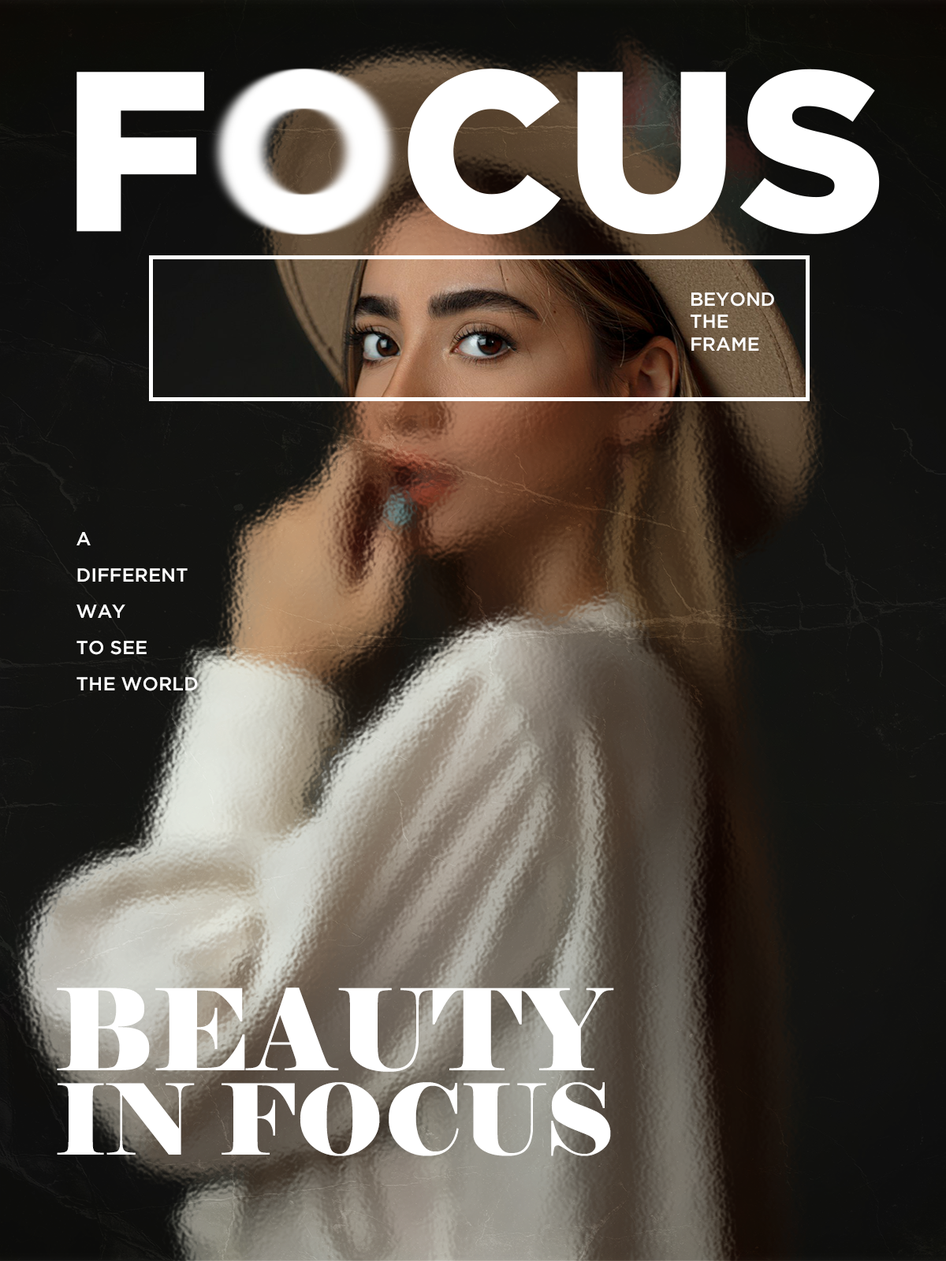
<style>
.page{position:relative;width:946px;height:1261px}
.page>*{position:absolute;margin:0}
.t1{font:18.9px "GothamMedium";color:#ffffff}
.t2{font:18.9px/36.3px "GothamMedium";color:#ffffff}
.t3{font:97.7px/84.3px "Elephant-Regular";color:#ffffff;text-transform:uppercase}
.t4{font:112.7px/84.3px "Elephant-Regular";color:#ffffff;text-transform:uppercase}
</style>
<div class="page">
<p class="t1" style="left:690px;top:292px;width:84px;height:59px">BEYOND<br>THE<br>FRAME</p>
<p class="t2" style="left:76px;top:532px;width:122px;height:159px">A<br>DIFFERENT<br>WAY<br>TO SEE<br>THE WORLD</p>
<p class="t3" style="left:57px;top:987px;width:557px;height:169px"><span class="t4">BEAUTY<br></span>In FOCUS</p>
</div>
